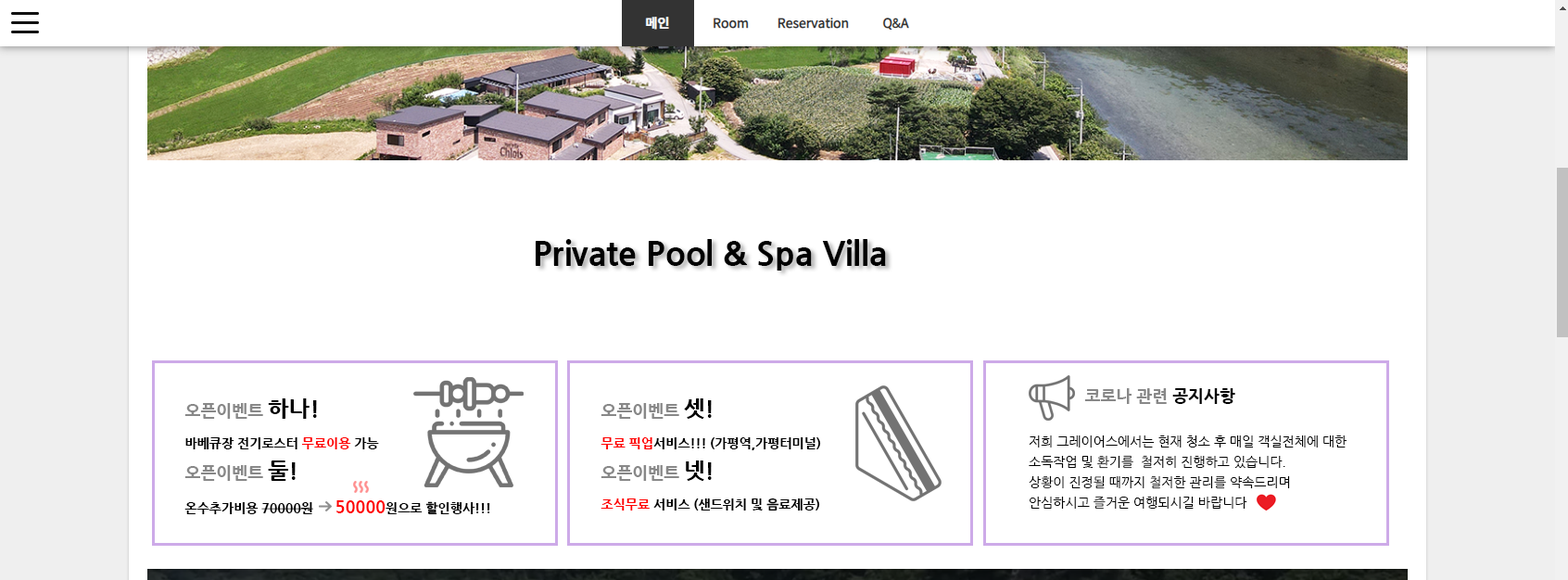
<style>
.page{position:relative;width:1568px;height:580px;background:#ffffff}
.page>*{position:absolute;margin:0}
.t1{font:33.4px "NanumGothicExtraBold";color:#000000}
.t2{font:16.7px "NanumGothicExtraBold";color:#888888}
.t3{font:16.7px "NanumGothicExtraBold";color:#000000}
.t4{font:13px "NanumGothicExtraBold";color:#000000}
.t5{font:22.2px "NanumGothicExtraBold";color:#000000}
.t6{font:13px "NanumGothicExtraBold";color:#ff0000}
.t7{font:16.7px "NanumGothicExtraBold";color:#ff0000}
.t8{font:13px/20.4px "NanumGothic";color:#000000}
</style>
<div class="page">
<p class="t1" style="left:536px;top:239px;width:350px;height:32px">Private Pool &amp; Spa Villa</p>
<p class="t2" style="left:1084px;top:388px;width:151px;height:16px">코로나 관련 <span class="t3">공지사항</span></p>
<p class="t4" style="left:184px;top:398px;width:306px;height:117px"><span class="t2">오픈이벤트 </span><span class="t5">하나!<br></span>바베큐장 전기로스터 <span class="t6">무료이용 </span>가능 <br><span class="t2">오픈이벤트 </span><span class="t5">둘!<br></span>온수추가비용 70000원      <span class="t7">50000</span>원으로 할인행사!!!</p>
<p class="t4" style="left:601px;top:398px;width:220px;height:114px"><span class="t2">오픈이벤트 </span><span class="t5">셋!<br></span><span class="t6">무료 픽업</span>서비스!!! (가평역,가평터미널) <br><span class="t2">오픈이벤트 </span><span class="t5">넷!<br></span><span class="t6">조식무료</span> 서비스 (샌드위치 및 음료제공)</p>
<p class="t8" style="left:1029px;top:436px;width:318px;height:74px">저희 그레이어스에서는 현재 청소 후 매일 객실전체에 대한 <br>소독작업 및 환기를  철저히 진행하고 있습니다.<br>상황이 진정될 때까지 철저한 관리를 약속드리며<br>안심하시고 즐거운 여행되시길 바랍니다</p>
</div>
